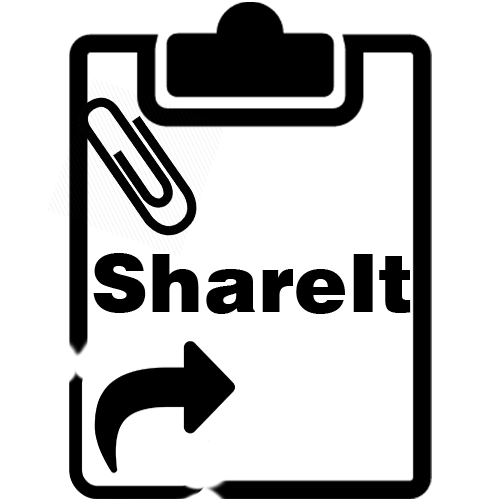
<style>
.page{position:relative;width:500px;height:500px;background:#ffffff}
.page>*{position:absolute;margin:0}
.t1{font:80px "Swiss721BT-Black";color:#000000}
</style>
<div class="page">
<p class="t1" style="left:93px;top:253px;width:318px;height:61px">ShareIt</p>
</div>
